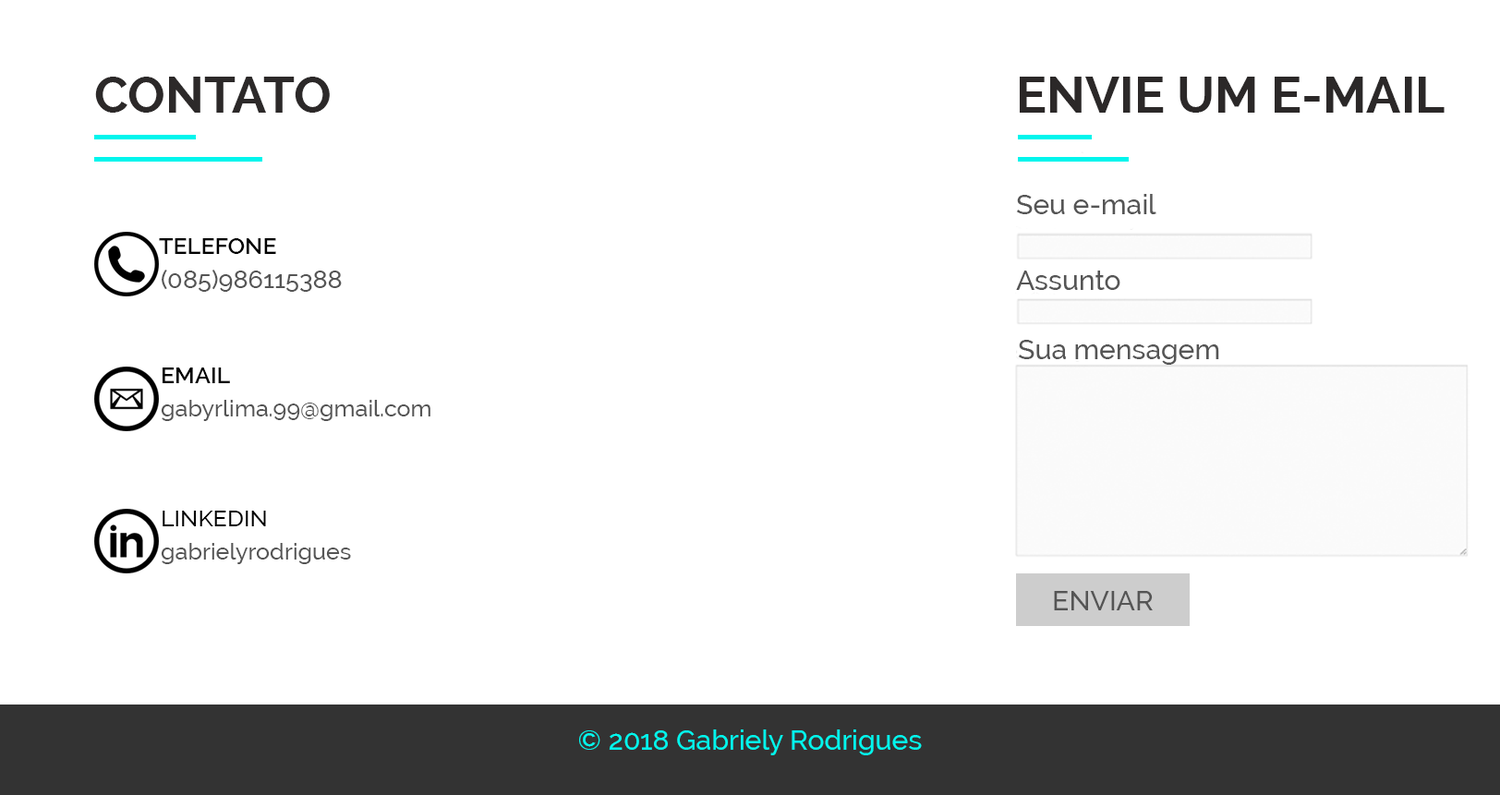
<style>
.page{position:relative;width:1500px;height:795px;background:#ffffff}
.page>*{position:absolute;margin:0}
.t1{font:50.8px "Raleway-Bold";color:#2c2929}
.t2{font:50.8px "Raleway-Bold";color:#2b2828}
.t3{font:27.7px "Raleway-Medium";color:#555555}
.t4{font:23.1px "Raleway-SemiBold";color:#000000}
.t5{font:24.9px "Raleway-Medium";color:#555555}
.t6{font:23.1px "Raleway-Medium";color:#555555}
.t7{font:23.1px "Raleway-Medium";color:#000000}
.t8{font:27.7px "Raleway-Medium";color:#00f6ed}
</style>
<div class="page">
<p class="t1" style="left:95px;top:77px;width:235px;height:36px">CONTATO</p>
<p class="t2" style="left:1020px;top:77px;width:424px;height:36px">ENVIE UM E-MAIL</p>
<p class="t3" style="left:1016px;top:194px;width:140px;height:20px">Seu e-mail</p>
<p class="t4" style="left:159px;top:238px;width:117px;height:16px">TELEFONE</p>
<p class="t5" style="left:162px;top:270px;width:180px;height:22px">(085)986115388</p>
<p class="t3" style="left:1016px;top:271px;width:104px;height:19px">Assunto</p>
<p class="t3" style="left:1018px;top:340px;width:201px;height:25px">Sua mensagem</p>
<p class="t4" style="left:163px;top:368px;width:67px;height:15px">EMAIL</p>
<p class="t6" style="left:161px;top:400px;width:269px;height:21px">gabyrlima.99@gmail.com</p>
<p class="t7" style="left:163px;top:511px;width:103px;height:15px">LINKEDIN</p>
<p class="t6" style="left:161px;top:543px;width:190px;height:21px">gabrielyrodrigues</p>
<p class="t3" style="left:1054px;top:591px;width:98px;height:19px">ENVIAR</p>
<p class="t8" style="left:579px;top:730px;width:343px;height:25px">© 2018 Gabriely Rodrigues</p>
</div>
